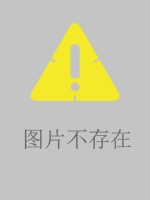
<style>
.page{position:relative;width:150px;height:200px;background:#c4c4c4}
.page>*{position:absolute;margin:0}
.t1{font:22px "SimSun";color:#6b6b6b}
</style>
<div class="page">
<p class="t1" style="left:24px;top:128px;width:107px;height:22px">图片不存在</p>
</div>
